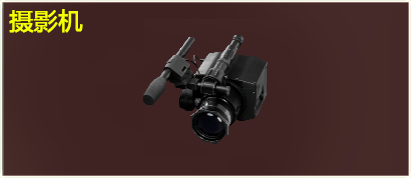
<style>
.page{position:relative;width:411px;height:178px}
.page>*{position:absolute;margin:0}
.t1{font:24px "MicrosoftYaHeiUI";color:#f4ff00;font-weight:bold}
</style>
<div class="page">
<p class="t1" style="left:9px;top:9px;width:74px;height:24px">摄影机</p>
</div>
